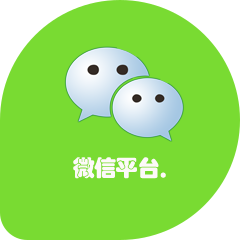
<style>
.page{position:relative;width:240px;height:240px;background:#79db32}
.page>*{position:absolute;margin:0}
.t1{font:22.5px "STHupo";letter-spacing:-0.04em;color:#fdf9f9}
</style>
<div class="page">
<p class="t1" style="left:73px;top:157px;width:86px;height:22px">微信平台</p>
<p class="t1" style="left:160px;top:172px;width:6px;height:6px">.</p>
</div>
